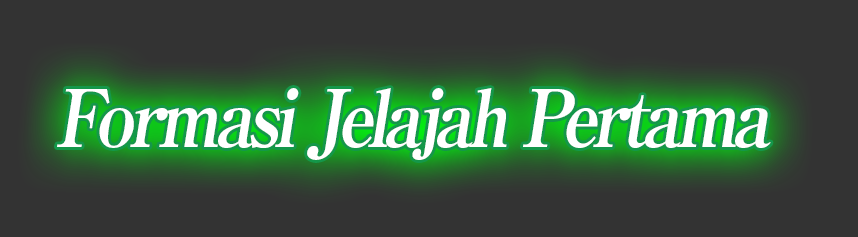
<style>
.page{position:relative;width:858px;height:237px;background:#333333}
.page>*{position:absolute;margin:0}
.t1{font:80px "RyuminPro-ExBold";letter-spacing:-0.08em;color:#ffffff;font-style:italic;scale:0.9 1}
</style>
<div class="page">
<p class="t1" style="left:57px;top:88px;width:714px;height:72px">Formasi Jelajah Pertama</p>
</div>
